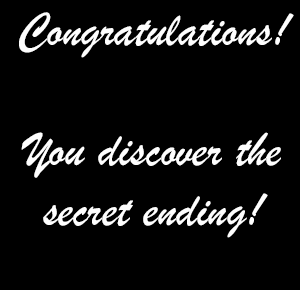
<style>
.page{position:relative;width:300px;height:290px;background:#000000}
.page>*{position:absolute;margin:0}
.t1{font:12px "BrushScriptMT";color:#fefefe}
</style>
<div class="page">
<p class="t1" style="left:19px;top:12px;width:275px;height:226px;text-align:center">Congratulations!<br><br>You discover the secret ending!</p>
</div>
